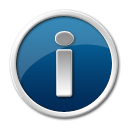
<style>
.page{position:relative;width:128px;height:128px;background:#ffffff}
.page>*{position:absolute;margin:0}
.t1{font:110px "EstrangeloEdessa";font-weight:bold;scale:1.2 1}
</style>
<div class="page">
<p class="t1" style="left:55px;top:31px;width:19px;height:66px">i</p>
</div>
